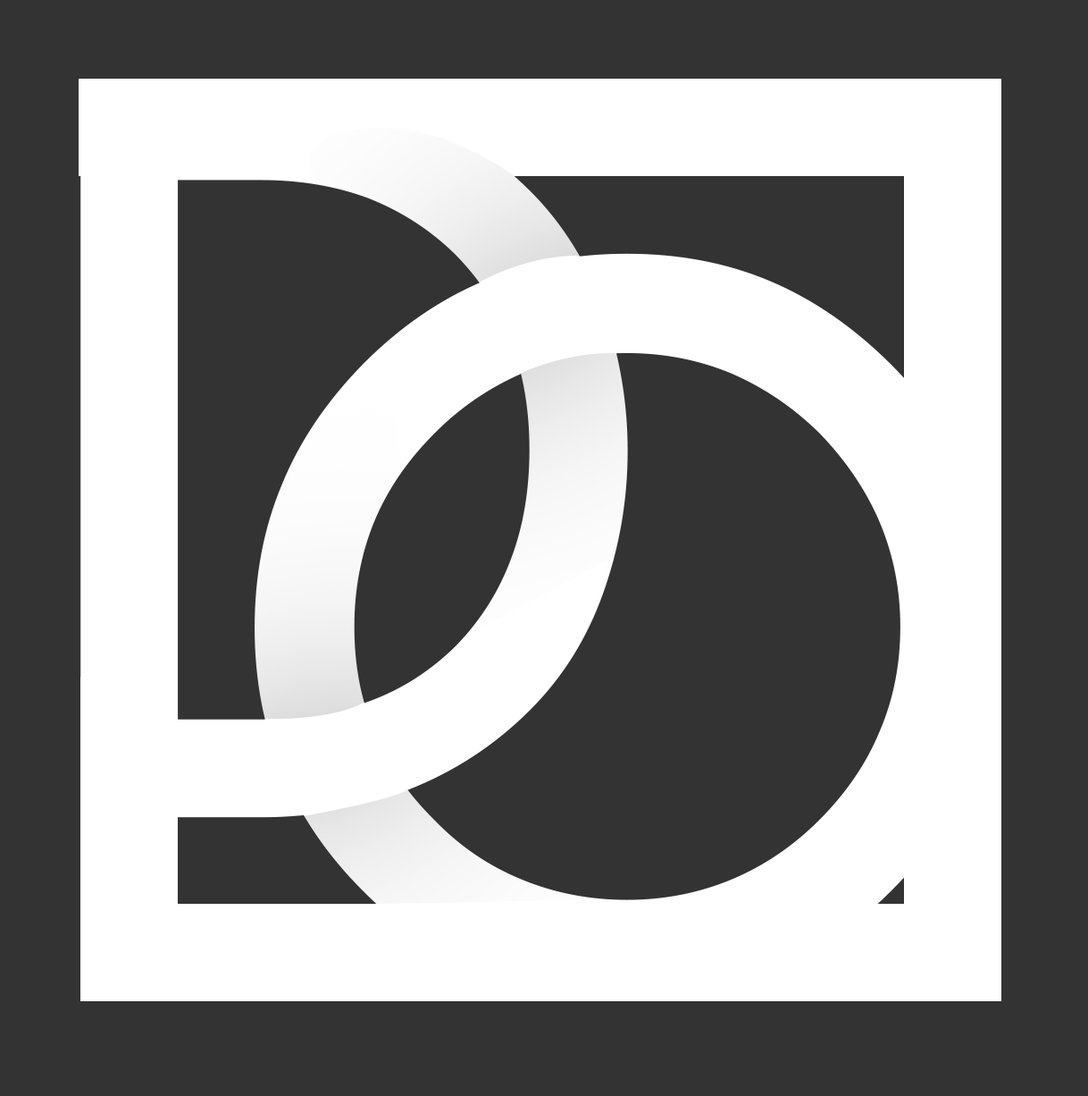
<style>
.page{position:relative;width:1088px;height:1096px;background:#333333}
.page>*{position:absolute;margin:0}
.t1{font:1011.3px "LemonMilklight";letter-spacing:2.08em;color:#ffffff}
</style>
<div class="page">
<p class="t1" style="left:80px;top:83px;width:548px;height:735px">D</p>
<p class="t1" style="left:255px;top:253px;width:747px;height:748px">O</p>
</div>
